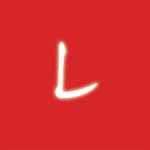
<style>
.page{position:relative;width:150px;height:150px;background:#d62629}
.page>*{position:absolute;margin:0}
.t1{font:80px "SketchFlowPrint";color:#ffffff}
</style>
<div class="page">
<p class="t1" style="left:55px;top:42px;width:43px;height:56px">L</p>
</div>
